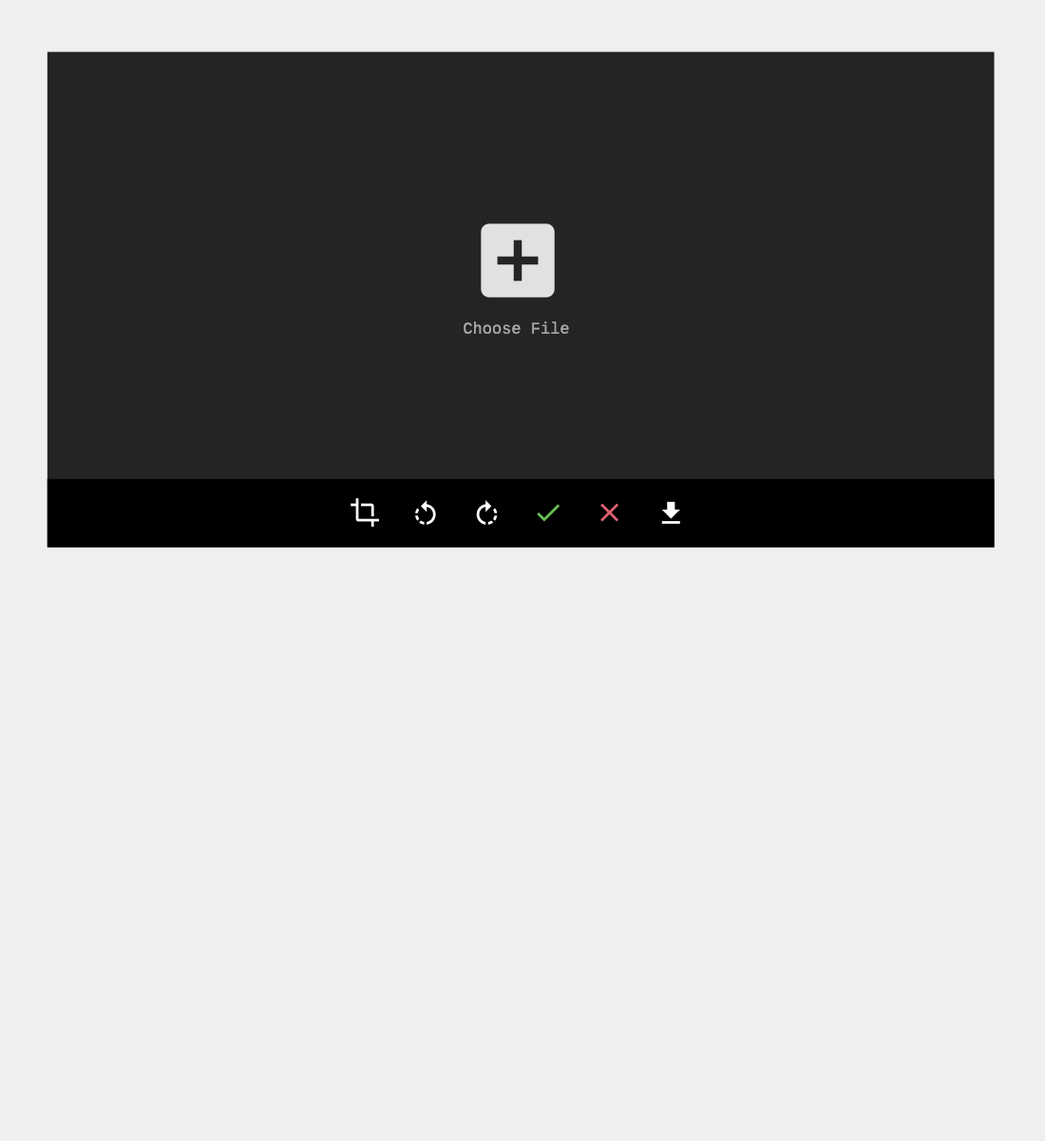
<style>
.page{position:relative;width:1045px;height:1141px;background:#edeff0}
.page>*{position:absolute;margin:0}
.t1{font:16.2px "Cousine";color:#aaaaaa}
</style>
<div class="page">
<p class="t1" style="left:464px;top:321px;width:105px;height:13px">Choose File</p>
</div>
